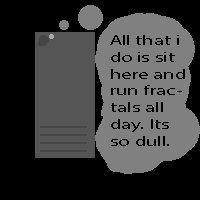
<style>
.page{position:relative;width:200px;height:200px;background:#000000}
.page>*{position:absolute;margin:0}
.t1{font:14px "MyriadPro-Regular";color:#010000;scale:1.5 1}
</style>
<div class="page">
<p class="t1" style="left:110px;top:35px;width:75px;height:111px">All that i do is sit here and run fractals all day. Its so dull.</p>
</div>
